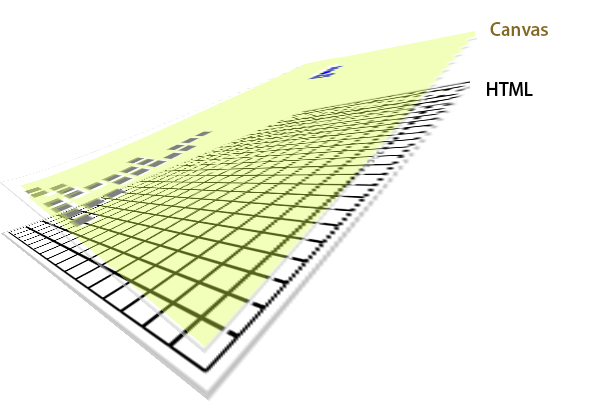
<style>
.page{position:relative;width:600px;height:405px;background:#ffffff}
.page>*{position:absolute;margin:0}
.t1{font:18px "AdobeFanHeitiStd-Bold";color:#826823}
.t2{font:18px "AdobeFanHeitiStd-Bold";color:#000000}
</style>
<div class="page">
<p class="t1" style="left:490px;top:22px;width:58px;height:14px">Canvas</p>
<p class="t2" style="left:487px;top:82px;width:46px;height:14px">HTML</p>
</div>
